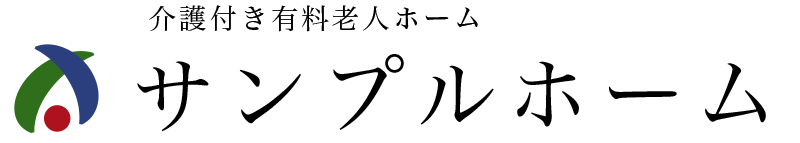
<style>
.page{position:relative;width:800px;height:143px;background:#ffffff}
.page>*{position:absolute;margin:0}
.t1{font:28px "HiraMinProN-W3";letter-spacing:0.1em;color:#000000}
.t2{font:85.8px "HiraMinProN-W3";letter-spacing:0.1em;color:#000000}
</style>
<div class="page">
<p class="t1" style="left:149px;top:5px;width:329px;height:27px">介護付き有料老人ホーム</p>
<p class="t2" style="left:137px;top:54px;width:629px;height:78px">サンプルホーム</p>
</div>
